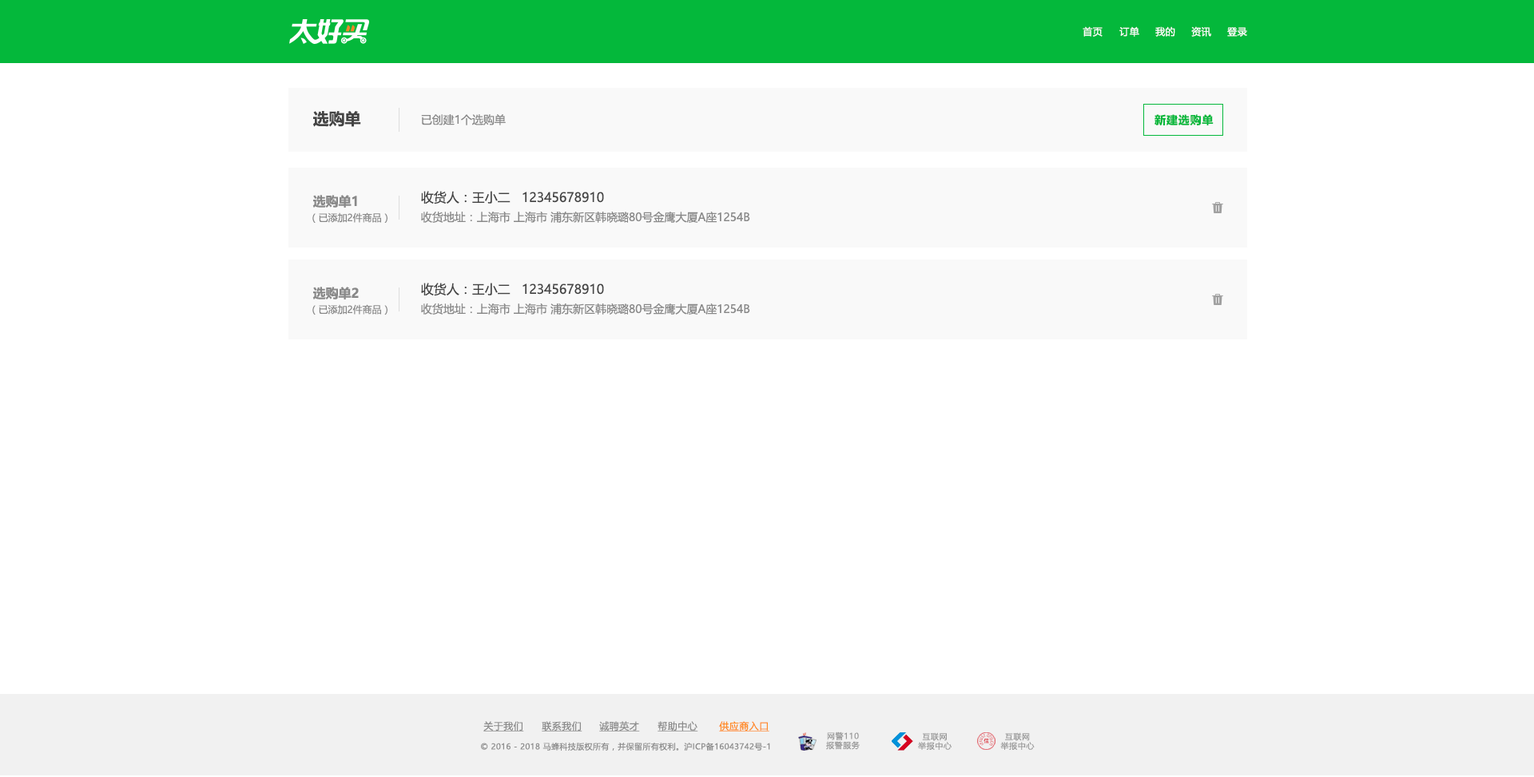
<style>
.page{position:relative;width:1534px;height:777px;background:#ffffff}
.page>*{position:absolute;margin:0}
.t1{font:9.6px "MicrosoftYaHeiUI";letter-spacing:0.04em;color:#ffffff}
.t2{font:16px "MicrosoftYaHeiUI-Bold";color:#444444}
.t3{font:11.2px "MicrosoftYaHeiUI";color:#888888}
.t4{font:11.2px "MicrosoftYaHeiUI-Bold";letter-spacing:0.06em;color:#04b83b}
.t5{font:12.8px "MicrosoftYaHeiUI-Bold";color:#888888}
.t6{font:12.8px "MicrosoftYaHeiUI";color:#444444}
.t7{font:9.6px "MicrosoftYaHeiUI";color:#888888}
.t8{font:9.6px "MicrosoftYaHeiUI";letter-spacing:0.04em;color:#8c8c8c;text-decoration:underline}
.t9{font:9.6px "MicrosoftYaHeiUI";letter-spacing:0.04em;color:#ff8b25;text-decoration:underline}
.t10{font:8px/9.3px "MicrosoftYaHei";letter-spacing:0.06em;color:#999999}
.t11{font:8px "MicrosoftYaHeiUI";letter-spacing:0.04em;color:#8c8c8c}
</style>
<div class="page">
<p class="t1" style="left:1083px;top:26px;width:20px;height:11px">首页</p>
<p class="t1" style="left:1119px;top:26px;width:20px;height:11px">订单</p>
<p class="t1" style="left:1155px;top:26px;width:20px;height:11px">我的</p>
<p class="t1" style="left:1191px;top:26px;width:20px;height:11px">资讯</p>
<p class="t1" style="left:1227px;top:27px;width:20px;height:10px">登录</p>
<p class="t2" style="left:313px;top:111px;width:48px;height:16px">选购单</p>
<p class="t3" style="left:421px;top:114px;width:85px;height:11px">已创建1个选购单</p>
<p class="t4" style="left:1154px;top:114px;width:60px;height:12px">新建选购单</p>
<p class="t5" style="left:312px;top:195px;width:45px;height:13px">选购单1</p>
<p class="t6" style="left:421px;top:191px;width:183px;height:14px">收货人：王小二   12345678910</p>
<p class="t7" style="left:312px;top:213px;width:75px;height:10px">（已添加2件商品）</p>
<p class="t3" style="left:421px;top:212px;width:329px;height:11px">收货地址：上海市 上海市 浦东新区韩晓璐80号金鹰大厦A座1254B</p>
<p class="t5" style="left:312px;top:287px;width:47px;height:13px">选购单2</p>
<p class="t6" style="left:421px;top:283px;width:183px;height:13px">收货人：王小二   12345678910</p>
<p class="t7" style="left:312px;top:304px;width:75px;height:11px">（已添加2件商品）</p>
<p class="t3" style="left:421px;top:304px;width:329px;height:11px">收货地址：上海市 上海市 浦东新区韩晓璐80号金鹰大厦A座1254B</p>
<p class="t8" style="left:483px;top:721px;width:41px;height:11px">关于我们</p>
<p class="t8" style="left:542px;top:721px;width:40px;height:11px">联系我们</p>
<p class="t8" style="left:599px;top:721px;width:41px;height:11px">诚聘英才</p>
<p class="t8" style="left:658px;top:721px;width:40px;height:11px">帮助中心</p>
<p class="t9" style="left:719px;top:721px;width:50px;height:11px">供应商入口</p>
<p class="t10" style="left:826px;top:732px;width:34px;height:18px;text-align:center">网警110<br>报警服务</p>
<p class="t10" style="left:918px;top:733px;width:34px;height:17px;text-align:center">互联网<br>举报中心</p>
<p class="t10" style="left:1000px;top:733px;width:35px;height:17px;text-align:center">互联网<br>举报中心</p>
<p class="t11" style="left:481px;top:742px;width:289px;height:9px">© 2016 - 2018 马蜂科技版权所有，并保留所有权利。沪ICP备16043742号-1</p>
</div>
